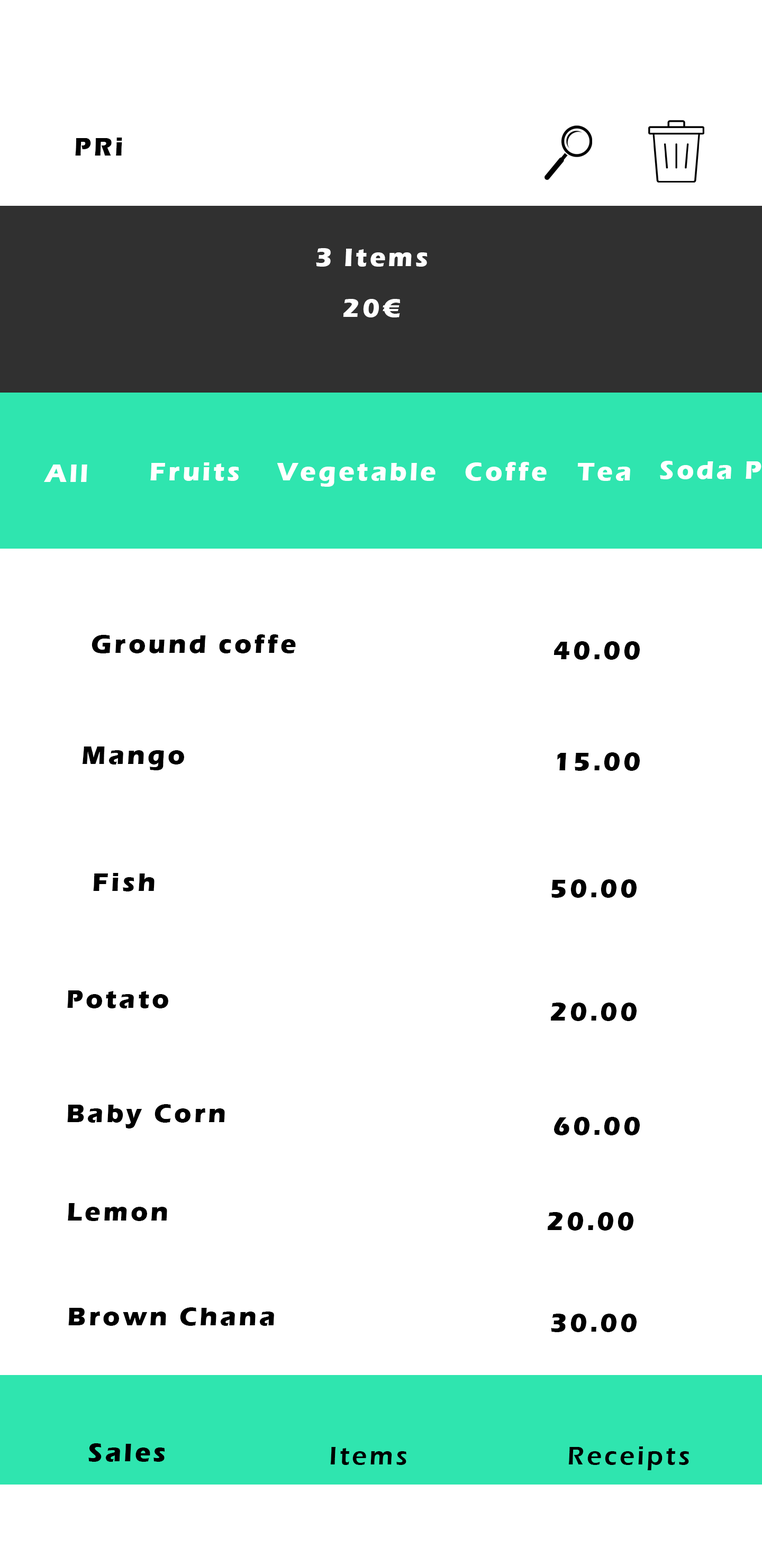
<style>
.page{position:relative;width:762px;height:1566px;background:#ffffff}
.page>*{position:absolute;margin:0}
.t1{font:26.4px "ErasITC-Bold";letter-spacing:0.1em;color:#000000}
.t2{font:26.4px "ErasITC-Bold";letter-spacing:0.1em;color:#ffffff}
.t3{font:26.4px "ErasITC-Demi";letter-spacing:0.1em;color:#000000}
</style>
<div class="page">
<p class="t1" style="left:75px;top:138px;width:47px;height:18px">PRi</p>
<p class="t2" style="left:316px;top:248px;width:111px;height:19px">3 Items</p>
<p class="t2" style="left:343px;top:299px;width:57px;height:18px">20€</p>
<p class="t2" style="left:465px;top:462px;width:81px;height:19px">Coffe</p>
<p class="t2" style="left:44px;top:464px;width:43px;height:18px">All</p>
<p class="t2" style="left:150px;top:462px;width:89px;height:19px">Fruits</p>
<p class="t2" style="left:277px;top:463px;width:158px;height:24px">Vegetable</p>
<p class="t2" style="left:577px;top:463px;width:53px;height:18px">Tea</p>
<p class="t1" style="left:92px;top:634px;width:204px;height:19px">Ground coffe</p>
<p class="t1" style="left:553px;top:641px;width:86px;height:19px">40.00</p>
<p class="t1" style="left:82px;top:746px;width:102px;height:24px">Mango</p>
<p class="t1" style="left:557px;top:752px;width:82px;height:19px">15.00</p>
<p class="t1" style="left:93px;top:873px;width:61px;height:18px">Fish</p>
<p class="t1" style="left:551px;top:879px;width:85px;height:19px">50.00</p>
<p class="t1" style="left:67px;top:990px;width:101px;height:18px">Potato</p>
<p class="t1" style="left:550px;top:1002px;width:86px;height:19px">20.00</p>
<p class="t1" style="left:67px;top:1104px;width:158px;height:24px">Baby Corn</p>
<p class="t1" style="left:554px;top:1117px;width:85px;height:18px">60.00</p>
<p class="t1" style="left:68px;top:1203px;width:99px;height:18px">Lemon</p>
<p class="t1" style="left:547px;top:1212px;width:86px;height:18px">20.00</p>
<p class="t1" style="left:68px;top:1307px;width:206px;height:18px">Brown Chana</p>
<p class="t1" style="left:551px;top:1313px;width:85px;height:19px">30.00</p>
<p class="t1" style="left:88px;top:1443px;width:77px;height:18px">Sales</p>
<p class="t3" style="left:330px;top:1447px;width:76px;height:18px">Items</p>
<p class="t3" style="left:568px;top:1446px;width:121px;height:24px">Receipts</p>
</div>
